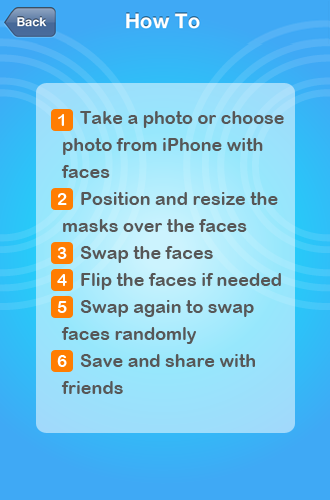
<style>
.page{position:relative;width:330px;height:500px}
.page>*{position:absolute;margin:0}
.t1{font:18px/27px "ArialRoundedMTBold";color:#575757}
.t2{font:17px "ArialRoundedMTBold";color:#ffffff}
</style>
<div class="page">
<p class="t1" style="left:61px;top:111px;width:223px;height:283px">Take a photo or choose photo from iPhone with faces<br>    Position and resize the masks over the faces<br>    Swap the faces<br>    Flip the faces if needed<br>    Swap again to swap faces randomly<br>    Save and share with friends</p>
<p class="t2" style="left:58px;top:114px;width:6px;height:12px">1</p>
<p class="t2" style="left:57px;top:193px;width:10px;height:12px">2</p>
<p class="t2" style="left:57px;top:247px;width:10px;height:12px">3</p>
<p class="t2" style="left:57px;top:274px;width:10px;height:12px">4</p>
<p class="t2" style="left:57px;top:301px;width:10px;height:12px">5</p>
<p class="t2" style="left:57px;top:355px;width:10px;height:12px">6</p>
</div>
